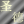
<style>
.page{position:relative;width:24px;height:24px}
.page>*{position:absolute;margin:0}
.t1{font:12.5px "System"}
.t2{font:12.5px "System";color:#d5d5b5}
</style>
<div class="page">
<p class="t1" style="left:0px;top:0px;width:12px;height:12px">圣</p>
<p class="t2" style="left:12px;top:11px;width:12px;height:12px">德</p>
</div>
